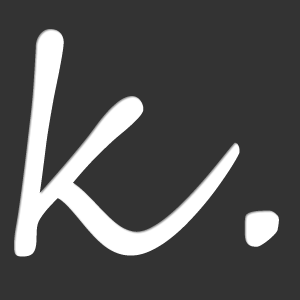
<style>
.page{position:relative;width:300px;height:300px;background:#333333}
.page>*{position:absolute;margin:0}
.t1{font:295.3px "SegoeScript";color:#ffffff}
</style>
<div class="page">
<p class="t1" style="left:14px;top:29px;width:265px;height:228px">k.</p>
</div>
